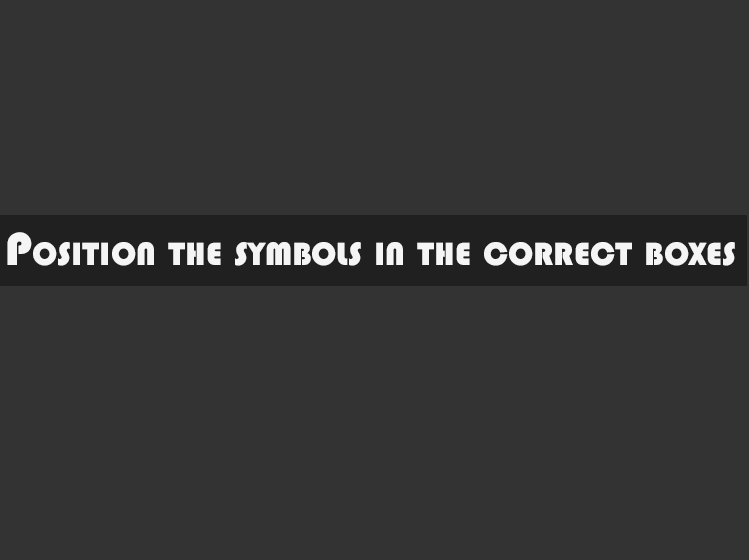
<style>
.page{position:relative;width:749px;height:560px;background:#333333}
.page>*{position:absolute;margin:0}
.t1{font:48px "Bauhaus93";color:#f5f5f5;font-variant:small-caps}
</style>
<div class="page">
<p class="t1" style="left:7px;top:232px;width:728px;height:34px">Position the symbols in the correct boxes</p>
</div>
